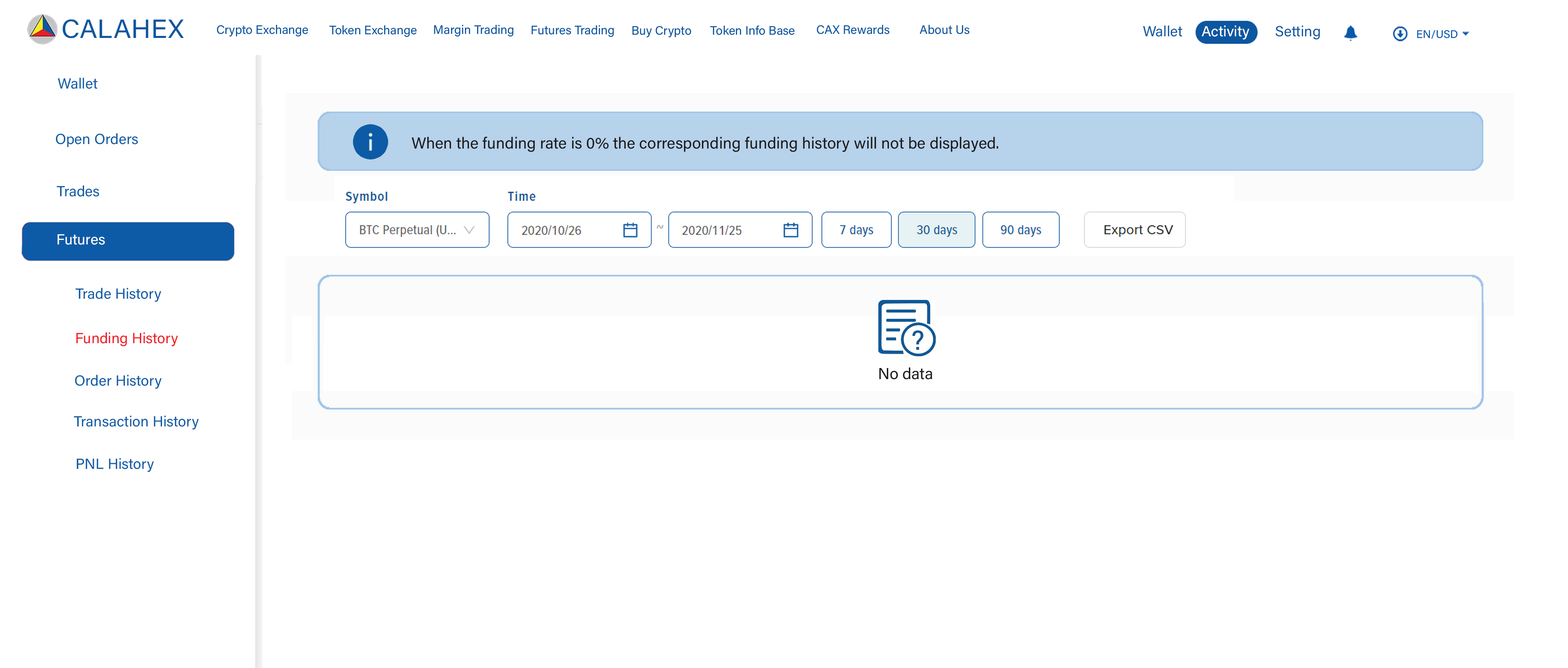
<style>
.page{position:relative;width:1568px;height:668px;background:#ffffff}
.page>*{position:absolute;margin:0}
.t1{font:26.4px "AcuminConcept-Regular";color:#0d57a0;font-style:italic}
.t2{font:12.2px "AcuminConcept-Regular";color:#0d57a0;font-style:italic}
.t3{font:11px "AcuminConcept-Regular";color:#055aaa;font-style:italic}
.t4{font:14.7px "AcuminConcept-Regular";color:#0d5ba6;font-style:italic}
.t5{font:15.9px "AcuminConcept-Regular";color:#191b1b;font-style:italic}
.t6{font:14.7px "AcuminConcept-Regular";color:#ffffff;font-style:italic}
.t7{font:14.7px "AcuminConcept-Regular";color:#ef1c24;font-style:italic}
</style>
<div class="page">
<p class="t1" style="left:62px;top:19px;width:122px;height:19px">CALAHEX</p>
<p class="t2" style="left:217px;top:24px;width:91px;height:13px">Crypto Exchange</p>
<p class="t2" style="left:329px;top:25px;width:88px;height:12px">Token Exchange</p>
<p class="t2" style="left:434px;top:24px;width:79px;height:13px">Margin Trading</p>
<p class="t2" style="left:531px;top:25px;width:83px;height:12px">Futures Trading</p>
<p class="t2" style="left:632px;top:26px;width:59px;height:12px">Buy Crypto</p>
<p class="t2" style="left:710px;top:25px;width:85px;height:10px">Token Info Base</p>
<p class="t2" style="left:817px;top:24px;width:73px;height:10px">CAX Rewards</p>
<p class="t2" style="left:919px;top:24px;width:51px;height:10px">About Us</p>
<p class="t3" style="left:1417px;top:30px;width:41px;height:9px">EN/USD</p>
<p class="t4" style="left:58px;top:78px;width:40px;height:11px">Wallet</p>
<p class="t4" style="left:56px;top:133px;width:82px;height:14px">Open Orders</p>
<p class="t5" style="left:411px;top:136px;width:587px;height:16px">When the funding rate is 0% the corresponding funding history will not be displayed.</p>
<p class="t4" style="left:57px;top:185px;width:42px;height:12px">Trades</p>
<p class="t6" style="left:58px;top:234px;width:47px;height:11px">Futures</p>
<p class="t4" style="left:76px;top:288px;width:85px;height:14px">Trade History</p>
<p class="t7" style="left:76px;top:332px;width:102px;height:14px">Funding History</p>
<p class="t4" style="left:75px;top:375px;width:87px;height:14px">Order History</p>
<p class="t5" style="left:879px;top:367px;width:53px;height:13px">No data</p>
<p class="t4" style="left:74px;top:415px;width:125px;height:15px">Transaction History</p>
<p class="t4" style="left:77px;top:458px;width:77px;height:14px">PNL History</p>
</div>
